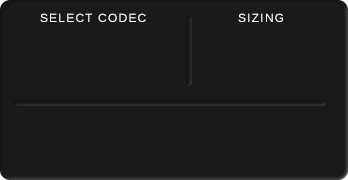
<style>
.page{position:relative;width:348px;height:180px;background:#1a1a1a}
.page>*{position:absolute;margin:0}
.t1{font:12px "LiberationSans";letter-spacing:0.1em;color:#ffffff}
</style>
<div class="page">
<p class="t1" style="left:40px;top:13px;width:106px;height:9px">SELECT CODEC</p>
<p class="t1" style="left:238px;top:13px;width:45px;height:9px">SIZING</p>
</div>
